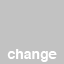
<style>
.page{position:relative;width:64px;height:64px;background:#c2c2c2}
.page>*{position:absolute;margin:0}
.t1{font:14px "Helvetica-Bold";color:#ffffff}
</style>
<div class="page">
<p class="t1" style="left:7px;top:49px;width:50px;height:13px">change</p>
</div>
